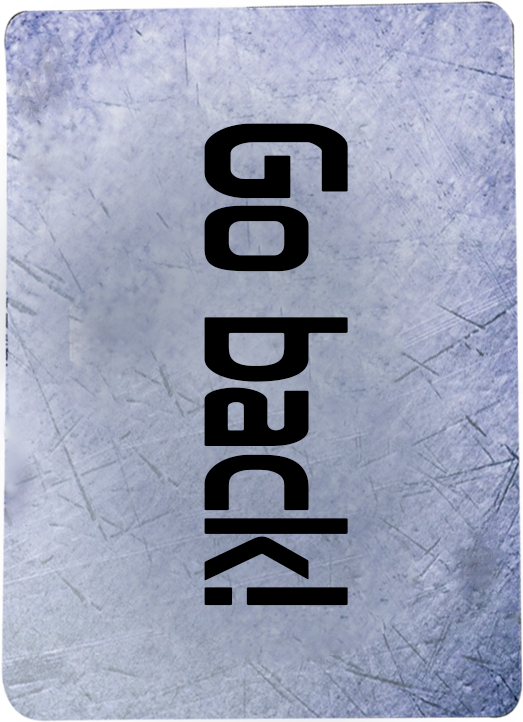
<style>
.page{position:relative;width:523px;height:722px}
.page>*{position:absolute;margin:0}
.t1{font:199.7px "Prototype";color:#000000;scale:0.64 1}
</style>
<div class="page">
<p class="t1" style="left:204px;top:123px;width:144px;height:483px;rotate:90deg">Go back!</p>
</div>
